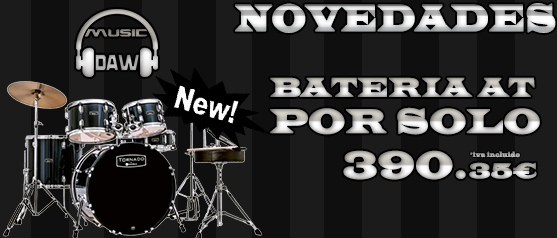
<style>
.page{position:relative;width:557px;height:238px;background:#1b1b1b}
.page>*{position:absolute;margin:0}
.t1{font:38.2px "LatinWide";font-weight:bold;scale:0.67 1}
.t2{font:27.2px "LatinWide";font-weight:bold;scale:0.8 1}
.t3{font:34.2px "LatinWide";font-weight:bold;scale:0.8 1}
.t4{font:38.2px "LatinWide";font-weight:bold;scale:0.8 1}
.t5{font:7.2px "LatinWide";color:#adadad;font-weight:bold;scale:0.65 1}
.t6{font:21.2px "LatinWide";font-weight:bold;scale:0.9 1}
</style>
<div class="page">
<p class="t1" style="left:235px;top:3px;width:321px;height:30px">NOVEDADES</p>
<p class="t2" style="left:270px;top:77px;width:265px;height:20px">BATERIA AT</p>
<p class="t3" style="left:270px;top:107px;width:270px;height:28px">POR SOLO</p>
<p class="t4" style="left:343px;top:150px;width:123px;height:30px">390.</p>
<p class="t5" style="left:470px;top:151px;width:51px;height:7px">*iva incluido</p>
<p class="t6" style="left:469px;top:162px;width:68px;height:17px">35€</p>
</div>
